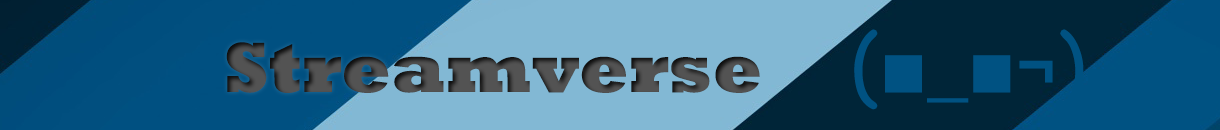
<style>
.page{position:relative;width:1220px;height:130px;background:#82b8d4}
.page>*{position:absolute;margin:0}
.t1{font:80px "ComicSansMS";color:#005282}
.t2{font:80px "Impact";color:#005282}
.t3{font:80px "Rockwell-ExtraBold";color:#005282}
.t4{font:60px "Rockwell-ExtraBold";color:#005282}
.t5{font:72px "Rockwell-ExtraBold";color:#4e4e4e}
</style>
<div class="page">
<p class="t1" style="left:854px;top:29px;width:230px;height:81px">(<span class="t2">■</span><span class="t3">_</span><span class="t2">■</span><span class="t4">¬</span>)</p>
<p class="t5" style="left:226px;top:42px;width:534px;height:51px">Streamverse</p>
</div>
